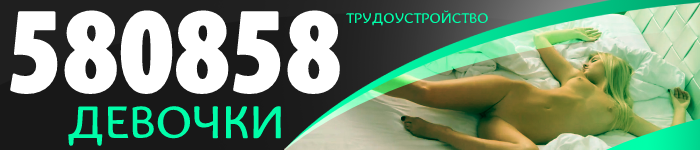
<style>
.page{position:relative;width:700px;height:150px}
.page>*{position:absolute;margin:0}
.t1{font:125.3px "Santana-BlackCondensed";color:#ffffff;text-transform:uppercase}
.t2{font:15px "Bainsley";color:#00fda9;text-transform:uppercase}
.t3{font:48.5px "Bainsley";color:#00fda9;text-transform:uppercase}
</style>
<div class="page">
<p class="t1" style="left:9px;top:10px;width:331px;height:85px">580858</p>
<p class="t2" style="left:346px;top:10px;width:142px;height:16px">трудоустройство</p>
<p class="t3" style="left:68px;top:106px;width:213px;height:40px">девочки</p>
</div>
